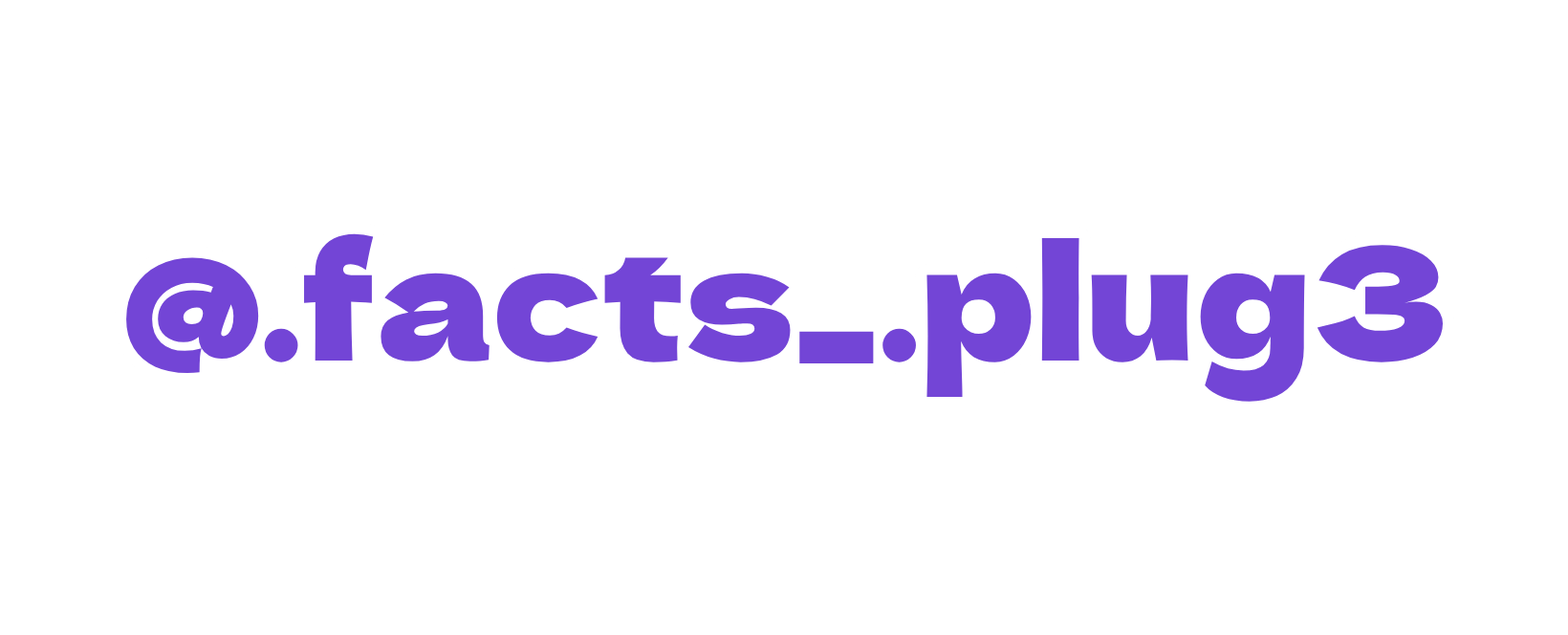
<style>
.page{position:relative;width:1568px;height:635px;background:#ffffff}
.page>*{position:absolute;margin:0}
.t1{font:156.8px "DelaGothicOne-Regular";color:#7345d6}
</style>
<div class="page">
<p class="t1" style="left:126px;top:233px;width:1318px;height:169px">@.facts_.plug3</p>
</div>
